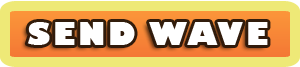
<style>
.page{position:relative;width:300px;height:67px;background:#eee977}
.page>*{position:absolute;margin:0}
.t1{font:30.5px "GillSans-UltraBold";letter-spacing:0.1em;color:#ffffff}
</style>
<div class="page">
<p class="t1" style="left:27px;top:22px;width:241px;height:23px">SEND WAVE</p>
</div>
